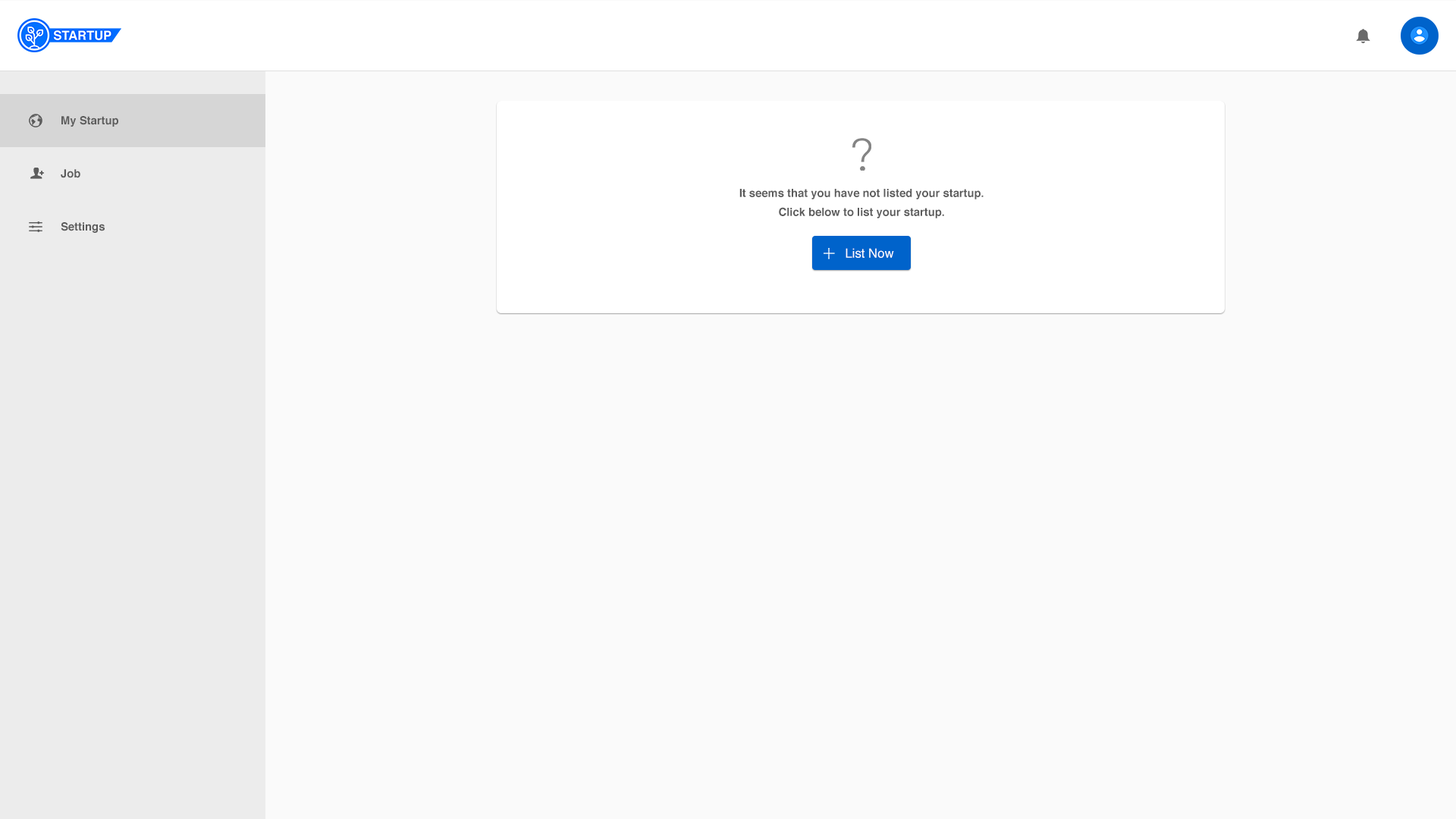
<style>
.page{position:relative;width:1456px;height:819px;background:#fafafa}
.page>*{position:absolute;margin:0}
.t1{font:11.2px "Helvetica-Bold";color:#5c5c5c}
.t2{font:11.2px/19px "Helvetica-Bold";color:#5c5c5c}
.t3{font:12.7px "Helvetica";color:#ffffff}
</style>
<div class="page">
<p class="t1" style="left:61px;top:116px;width:57px;height:11px">My Startup</p>
<p class="t1" style="left:61px;top:169px;width:19px;height:9px">Job</p>
<p class="t2" style="left:739px;top:189px;width:245px;height:29px;text-align:center">It seems that you have not listed your startup.<br>Click below to list your startup.</p>
<p class="t1" style="left:61px;top:222px;width:44px;height:11px">Settings</p>
<p class="t3" style="left:846px;top:248px;width:48px;height:10px">List Now</p>
</div>
